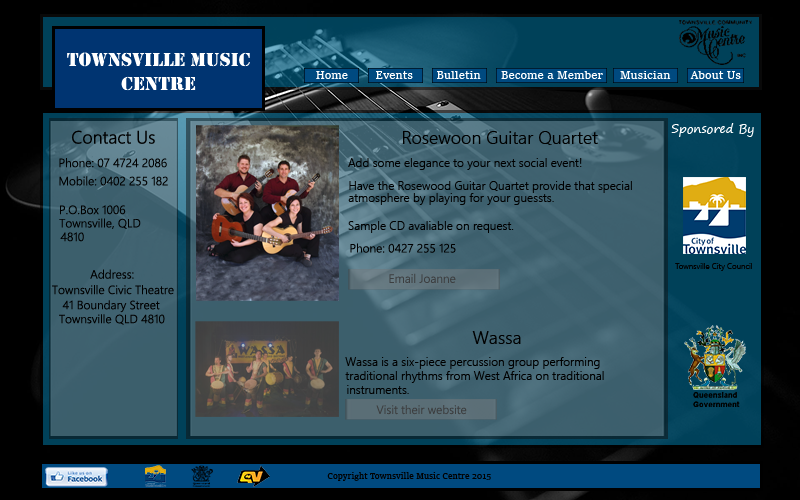
<style>
.page{position:relative;width:800px;height:500px}
.page>*{position:absolute;margin:0}
.t1{font:20px "Stencil";color:#ffffff}
.t2{font:24px "Rockwell-ExtraBold";color:#ffffff}
.t3{font:11px "SitkaSmall";color:#ffffff}
.t4{font:12px "SegoePrint";color:#ffffff}
.t5{font:18px "SegoeUI-Semilight";color:#000000}
.t6{font:12px "SegoeUI-Semilight";color:#000000}
.t7{font:8px "SegoeUI-Semilight";color:#010101}
.t8{font:12px "SegoeUI-Semilight";color:#3c3e40}
.t9{font:8px "SitkaSmall";color:#000000}
</style>
<div class="page">
<p class="t1" style="left:67px;top:52px;width:183px;height:39px"><span class="t2"><br></span>Townsville Music Centre</p>
<p class="t3" style="left:316px;top:71px;width:425px;height:8px">Home        Events       Bulletin      Become a Member     Musician      About Us</p>
<p class="t4" style="left:671px;top:123px;width:83px;height:14px">Sponsored By</p>
<p class="t5" style="left:72px;top:130px;width:83px;height:14px">Contact Us</p>
<p class="t5" style="left:403px;top:131px;width:195px;height:14px">Rosewoon Guitar Quartet</p>
<p class="t6" style="left:59px;top:158px;width:108px;height:10px">Phone: 07 4724 2086</p>
<p class="t6" style="left:348px;top:158px;width:234px;height:12px">Add some elegance to your next social event!</p>
<p class="t6" style="left:59px;top:176px;width:109px;height:10px">Mobile: 0402 255 182</p>
<p class="t6" style="left:349px;top:181px;width:283px;height:12px">Have the Rosewood Guitar Quartet provide that special</p>
<p class="t6" style="left:348px;top:193px;width:206px;height:12px">atmosphere by playing for your guessts.</p>
<p class="t6" style="left:60px;top:205px;width:66px;height:10px">P.O.Box 1006</p>
<p class="t6" style="left:59px;top:218px;width:82px;height:11px">Townsville, QLD</p>
<p class="t6" style="left:348px;top:221px;width:166px;height:12px">Sample CD avaliable on request.</p>
<p class="t6" style="left:60px;top:232px;width:24px;height:10px">4810</p>
<p class="t6" style="left:350px;top:243px;width:106px;height:10px">Phone: 0427 255 125</p>
<p class="t6" style="left:90px;top:269px;width:44px;height:10px">Address:</p>
<p class="t7" style="left:675px;top:263px;width:77px;height:8px">Townsville City Council</p>
<p class="t8" style="left:389px;top:273px;width:67px;height:10px">Email Joanne</p>
<p class="t6" style="left:52px;top:285px;width:122px;height:10px">Townsville Civic Theatre</p>
<p class="t6" style="left:62px;top:300px;width:98px;height:13px">41 Boundary Street</p>
<p class="t6" style="left:59px;top:314px;width:106px;height:11px">Townsville QLD 4810</p>
<p class="t5" style="left:472px;top:331px;width:49px;height:13px">Wassa</p>
<p class="t6" style="left:345px;top:357px;width:255px;height:12px">Wassa is a six-piece percussion group performing</p>
<p class="t6" style="left:345px;top:371px;width:259px;height:12px">traditional rhythms from West Africa on traditional</p>
<p class="t6" style="left:347px;top:385px;width:62px;height:9px">instruments.</p>
<p class="t8" style="left:376px;top:405px;width:91px;height:10px">Visit their website</p>
<p class="t9" style="left:327px;top:472px;width:164px;height:9px">Copyright Townsville Music Centre 2015</p>
</div>
